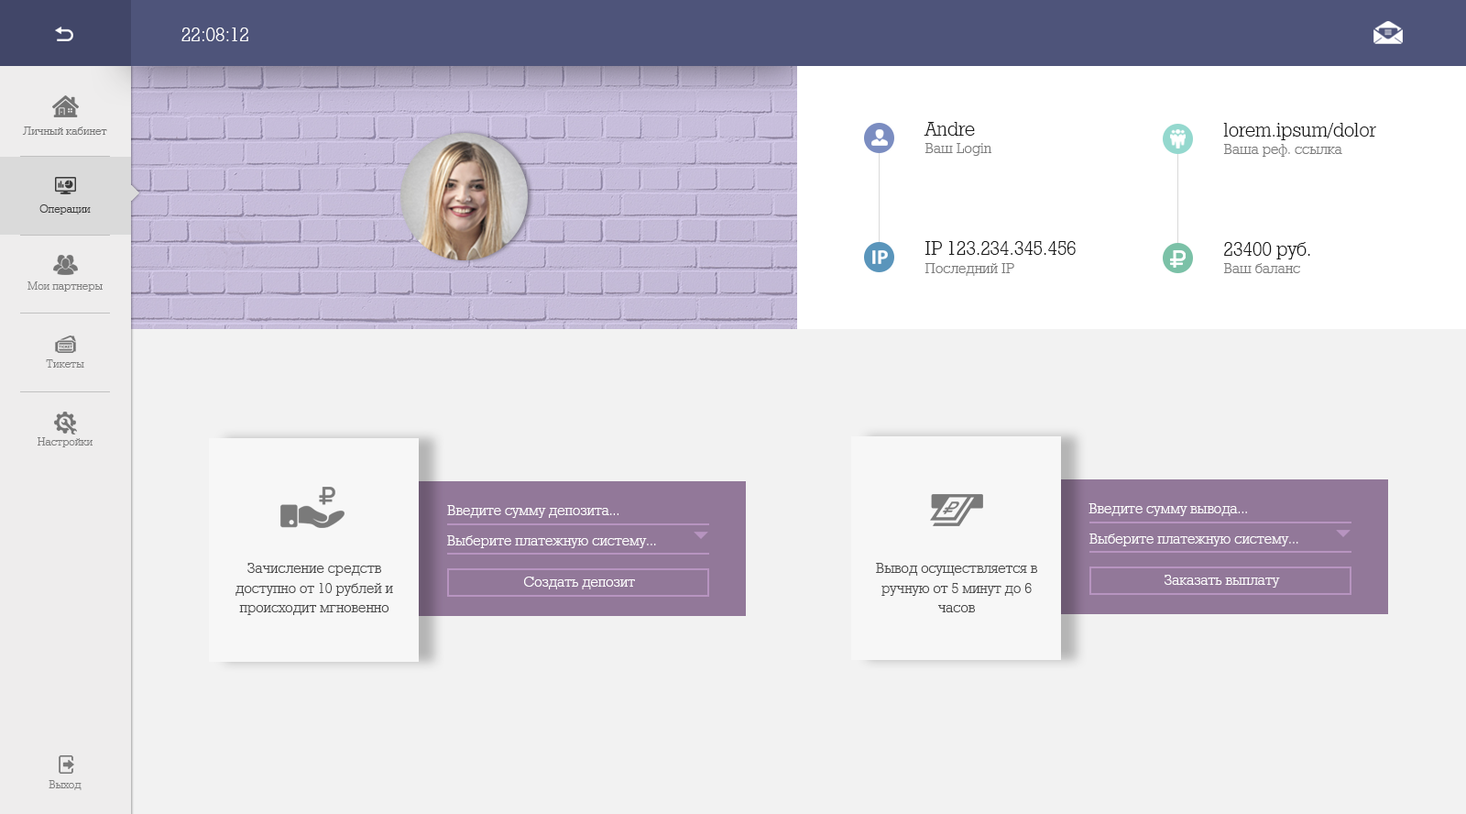
<style>
.page{position:relative;width:1466px;height:814px;background:#f2f2f2}
.page>*{position:absolute;margin:0}
.t1{font:22px "Rodeo95";color:#ffffff}
.t2{font:22px "Rodeo95";color:#1c1c1c}
.t3{font:22px "Rodeo95";color:#191919}
.t4{font:12.8px "Rodeo95";color:#747474}
.t5{font:16.5px "Rodeo95";color:#7a7a7a}
.t6{font:12.8px "Rodeo95";color:#393939}
.t7{font:12.8px "Rodeo95";color:#7e7e7e}
.t8{font:16.5px "Rodeo95";color:#ffffff}
.t9{font:16.5px/19.7px "Rodeo95";color:#484848}
</style>
<div class="page">
<p class="t1" style="left:181px;top:27px;width:67px;height:14px">22:08:12</p>
<p class="t2" style="left:923px;top:122px;width:52px;height:14px">Andre</p>
<p class="t3" style="left:1223px;top:123px;width:153px;height:17px">lorem.ipsum/dolor</p>
<p class="t4" style="left:22px;top:126px;width:85px;height:9px">Личный кабинет</p>
<p class="t5" style="left:924px;top:143px;width:67px;height:13px">Ваш Login</p>
<p class="t5" style="left:1223px;top:144px;width:119px;height:13px">Ваша реф. ссылка</p>
<p class="t6" style="left:39px;top:204px;width:52px;height:10px">Операции</p>
<p class="t3" style="left:925px;top:241px;width:151px;height:14px">IP 123.234.345.456</p>
<p class="t3" style="left:1224px;top:242px;width:86px;height:17px">23400 руб.</p>
<p class="t5" style="left:924px;top:263px;width:90px;height:13px">Последний IP</p>
<p class="t5" style="left:1223px;top:263px;width:77px;height:10px">Ваш баланс</p>
<p class="t7" style="left:27px;top:281px;width:76px;height:10px">Мои партнеры</p>
<p class="t7" style="left:46px;top:359px;width:38px;height:8px">Тикеты</p>
<p class="t7" style="left:38px;top:437px;width:55px;height:10px">Настройки</p>
<p class="t8" style="left:447px;top:505px;width:171px;height:13px">Введите сумму депозита...</p>
<p class="t8" style="left:1088px;top:503px;width:159px;height:13px">Введите сумму вывода...</p>
<p class="t8" style="left:1089px;top:533px;width:209px;height:13px">Выберите платежную систему...</p>
<p class="t8" style="left:447px;top:535px;width:209px;height:13px">Выберите платежную систему...</p>
<p class="t9" style="left:235px;top:562px;width:158px;height:53px;text-align:center">Зачисление средств <br>доступно от 10 рублей и происходит мгновенно</p>
<p class="t9" style="left:876px;top:562px;width:161px;height:50px;text-align:center">Вывод осуществляется в ручную от 5 минут до 6 часов</p>
<p class="t8" style="left:524px;top:576px;width:111px;height:13px">Создать депозит</p>
<p class="t8" style="left:1163px;top:574px;width:117px;height:13px">Заказать выплату</p>
<p class="t7" style="left:49px;top:780px;width:33px;height:10px">Выход</p>
</div>
